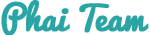
<style>
.page{position:relative;width:150px;height:35px;background:#ffffff}
.page>*{position:absolute;margin:0}
.t1{font:33px "Pacifico-Regular";color:#2aa4a5;font-weight:bold}
.t2{font:33px "Pacifico-Regular";letter-spacing:-0.25em;color:#2aa4a5;font-weight:bold}
</style>
<div class="page">
<p class="t1" style="left:1px;top:0px;width:148px;height:36px">Phai <span class="t2">T</span>eam</p>
</div>
